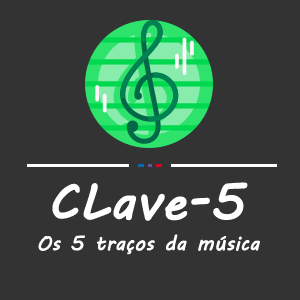
<style>
.page{position:relative;width:300px;height:300px;background:#333333}
.page>*{position:absolute;margin:0}
.t1{font:50px "MVBoli";color:#ffffff;font-weight:bold}
.t2{font:20px "MVBoli";color:#ffffff;font-weight:bold}
</style>
<div class="page">
<p class="t1" style="left:52px;top:182px;width:196px;height:39px">CLave-5</p>
<p class="t2" style="left:38px;top:234px;width:222px;height:21px">Os 5 traços da música</p>
</div>
